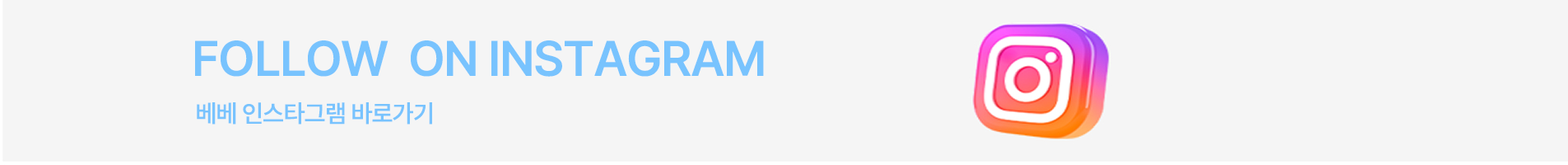
<style>
.page{position:relative;width:1568px;height:165px;background:#f5f5f5}
.page>*{position:absolute;margin:0}
.t1{font:49.4px "PretendardVariable-SemiBold";letter-spacing:-0.025em;color:#78c3fe}
.t2{font:24.7px "PretendardVariable-SemiBold";letter-spacing:-0.025em;color:#78c3fe}
</style>
<div class="page">
<p class="t1" style="left:195px;top:40px;width:569px;height:37px">FOLLOW  ON INSTAGRAM</p>
<p class="t2" style="left:197px;top:102px;width:235px;height:22px">베베 인스타그램 바로가기</p>
</div>
